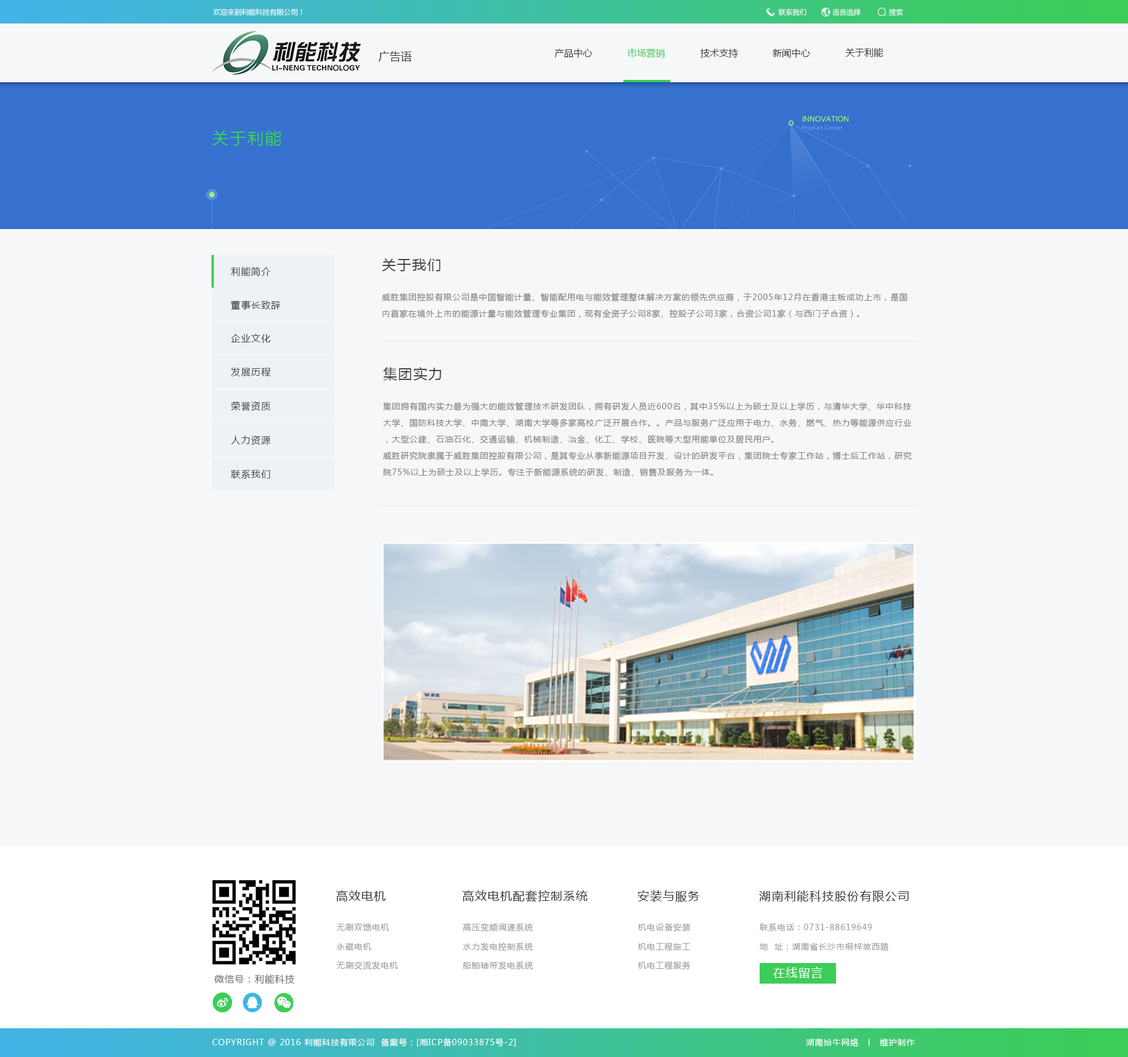
<style>
.page{position:relative;width:1128px;height:1057px;background:#f6f7f9}
.page>*{position:absolute;margin:0}
.t1{font:7px "MicrosoftYaHei";color:#f6f7f9}
.t2{font:11.1px "MicrosoftYaHei";color:#343434}
.t3{font:9.4px "MicrosoftYaHei";color:#343434}
.t4{font:9.4px "MicrosoftYaHei";color:#3dcd58}
.t5{font:16.4px "MicrosoftYaHei";letter-spacing:0.072em;color:#3dcd58}
.t6{font:9.4px "MicrosoftYaHei";letter-spacing:0.072em;color:#444444}
.t7{font:14.1px "MicrosoftYaHei";letter-spacing:0.072em;color:#444444}
.t8{font:8.2px/16.4px "MicrosoftYaHei";letter-spacing:0.072em;color:#7f7f7f}
.t9{font:11.7px "MicrosoftYaHei";letter-spacing:0.072em;color:#323232}
.t10{font:8.2px "MicrosoftYaHei";letter-spacing:0.072em;color:#9a9a9a}
.t11{font:9.4px "MicrosoftYaHei";letter-spacing:0.072em;color:#676767}
.t12{font:11.7px "MicrosoftYaHei";letter-spacing:0.072em;color:#ffffff}
.t13{font:8.2px "MicrosoftYaHei";letter-spacing:0.072em;color:#ffffff}
</style>
<div class="page">
<p class="t1" style="left:213px;top:8px;width:89px;height:8px">欢迎来到利能科技有限公司！</p>
<p class="t1" style="left:778px;top:9px;width:28px;height:7px">联系我们</p>
<p class="t1" style="left:832px;top:8px;width:29px;height:8px">语言选择</p>
<p class="t1" style="left:889px;top:8px;width:14px;height:8px">搜索</p>
<p class="t2" style="left:378px;top:51px;width:34px;height:11px">广告语</p>
<p class="t3" style="left:555px;top:49px;width:37px;height:9px">产品中心</p>
<p class="t4" style="left:627px;top:48px;width:38px;height:10px">市场营销</p>
<p class="t3" style="left:700px;top:49px;width:38px;height:9px">技术支持</p>
<p class="t3" style="left:772px;top:49px;width:38px;height:9px">新闻中心</p>
<p class="t3" style="left:845px;top:48px;width:38px;height:9px">关于利能</p>
<p class="t5" style="left:212px;top:130px;width:69px;height:16px">关于利能</p>
<p class="t6" style="left:231px;top:267px;width:40px;height:10px">利能简介</p>
<p class="t7" style="left:382px;top:258px;width:59px;height:13px">关于我们</p>
<p class="t8" style="left:382px;top:293px;width:525px;height:25px">威胜集团控股有限公司是中国智能计量、智能配用电与能效管理整体解决方案的领先供应商，于2005年12月在香港主板成功上市，是国内首家在境外上市的能源计量与能效管理专业集团，现有全资子公司8家、控股子公司3家，合资公司1家（与西门子合资）。</p>
<p class="t6" style="left:231px;top:300px;width:50px;height:10px">董事长致辞</p>
<p class="t6" style="left:231px;top:334px;width:40px;height:9px">企业文化</p>
<p class="t6" style="left:231px;top:368px;width:40px;height:9px">发展历程</p>
<p class="t7" style="left:383px;top:367px;width:58px;height:14px">集团实力</p>
<p class="t6" style="left:231px;top:401px;width:40px;height:10px">荣誉资质</p>
<p class="t8" style="left:383px;top:402px;width:529px;height:75px">集团拥有国内实力最为强大的能效管理技术研发团队，拥有研发人员近600名，其中35%以上为硕士及以上学历，与清华大学、华中科技大学、国防科技大学、中南大学、湖南大学等多家高校广泛开展合作。。产品与服务广泛应用于电力、水务、燃气、热力等能源供应行业，大型公建、石油石化、交通运输、机械制造、冶金、化工、学校、医院等大型用能单位及居民用户。<br>威胜研究院隶属于威胜集团控股有限公司，是其专业从事新能源项目开发、设计的研发平台，集团院士专家工作站，博士后工作站，研究院75%以上为硕士及以上学历。专注于新能源系统的研发、制造、销售及服务为一体。</p>
<p class="t6" style="left:231px;top:435px;width:40px;height:10px">人力资源</p>
<p class="t6" style="left:231px;top:470px;width:39px;height:9px">联系我们</p>
<p class="t9" style="left:336px;top:890px;width:50px;height:12px">高效电机</p>
<p class="t9" style="left:462px;top:890px;width:125px;height:12px">高效电机配套控制系统</p>
<p class="t9" style="left:637px;top:890px;width:63px;height:12px">安装与服务</p>
<p class="t9" style="left:759px;top:890px;width:150px;height:12px">湖南利能科技股份有限公司</p>
<p class="t10" style="left:337px;top:923px;width:52px;height:9px">无刷双馈电机</p>
<p class="t10" style="left:463px;top:923px;width:70px;height:9px">高压变频调速系统</p>
<p class="t10" style="left:638px;top:923px;width:52px;height:9px">机电设备安装</p>
<p class="t10" style="left:760px;top:923px;width:112px;height:9px">联系电话：0731-88619649</p>
<p class="t10" style="left:337px;top:943px;width:34px;height:8px">永磁电机</p>
<p class="t10" style="left:463px;top:943px;width:70px;height:8px">水力发电控制系统</p>
<p class="t10" style="left:638px;top:943px;width:52px;height:9px">机电工程施工</p>
<p class="t10" style="left:760px;top:943px;width:129px;height:9px">地  址：湖南省长沙市桐梓坡西路</p>
<p class="t10" style="left:337px;top:962px;width:61px;height:8px">无刷交流发电机</p>
<p class="t10" style="left:463px;top:962px;width:70px;height:8px">船舶轴带发电系统</p>
<p class="t10" style="left:638px;top:962px;width:52px;height:8px">机电工程服务</p>
<p class="t11" style="left:214px;top:974px;width:80px;height:10px">微信号：利能科技</p>
<p class="t12" style="left:773px;top:967px;width:49px;height:12px">在线留言</p>
<p class="t13" style="left:212px;top:1039px;width:304px;height:8px">COPYRIGHT @ 2016 利能科技有限公司  备案号：[湘ICP备09033875号-2]</p>
<p class="t13" style="left:806px;top:1039px;width:109px;height:8px">湖南拾牛网络  丨  维护制作</p>
</div>
